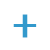
<style>
.page{position:relative;width:50px;height:50px;background:#ffffff}
.page>*{position:absolute;margin:0}
.t1{font:45.8px "Roboto-Regular";color:#3399cc}
</style>
<div class="page">
<p class="t1" style="left:13px;top:14px;width:24px;height:24px">+</p>
</div>
